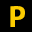
<style>
.page{position:relative;width:32px;height:32px;background:#000000}
.page>*{position:absolute;margin:0}
.t1{font:30px "MyriadPro-Bold";letter-spacing:-0.05em;color:#fbcb00}
</style>
<div class="page">
<p class="t1" style="left:10px;top:6px;width:15px;height:21px">P</p>
</div>
